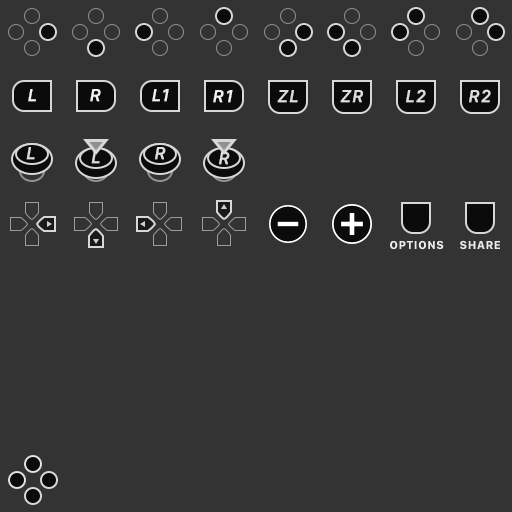
<style>
.page{position:relative;width:512px;height:512px;background:#333333}
.page>*{position:absolute;margin:0}
.t1{font:18px "SFCompactText-MediumItalic";letter-spacing:0.05em;color:#f1f0f0;font-weight:bold}
.t2{font:18px "SFCompactText-MediumItalic";letter-spacing:0.05em;color:#dddddd;font-weight:bold}
.t3{font:12px "SFCompactText-Bold";letter-spacing:0.05em;color:#ececec}
</style>
<div class="page">
<p class="t1" style="left:28px;top:89px;width:8px;height:13px">L</p>
<p class="t1" style="left:90px;top:89px;width:11px;height:13px">R</p>
<p class="t1" style="left:152px;top:89px;width:17px;height:13px">L1</p>
<p class="t2" style="left:406px;top:89px;width:20px;height:14px">L2</p>
<p class="t2" style="left:469px;top:89px;width:22px;height:14px">R2</p>
<p class="t1" style="left:213px;top:90px;width:20px;height:13px">R1</p>
<p class="t2" style="left:277px;top:90px;width:21px;height:13px">ZL</p>
<p class="t2" style="left:340px;top:90px;width:23px;height:13px">ZR</p>
<p class="t2" style="left:26px;top:147px;width:9px;height:13px">L</p>
<p class="t2" style="left:155px;top:147px;width:11px;height:13px">R</p>
<p class="t2" style="left:91px;top:151px;width:9px;height:13px">L</p>
<p class="t2" style="left:219px;top:152px;width:11px;height:13px">R</p>
<p class="t3" style="left:390px;top:240px;width:54px;height:10px">OPTIONS</p>
<p class="t3" style="left:460px;top:240px;width:40px;height:10px">SHARE</p>
</div>
